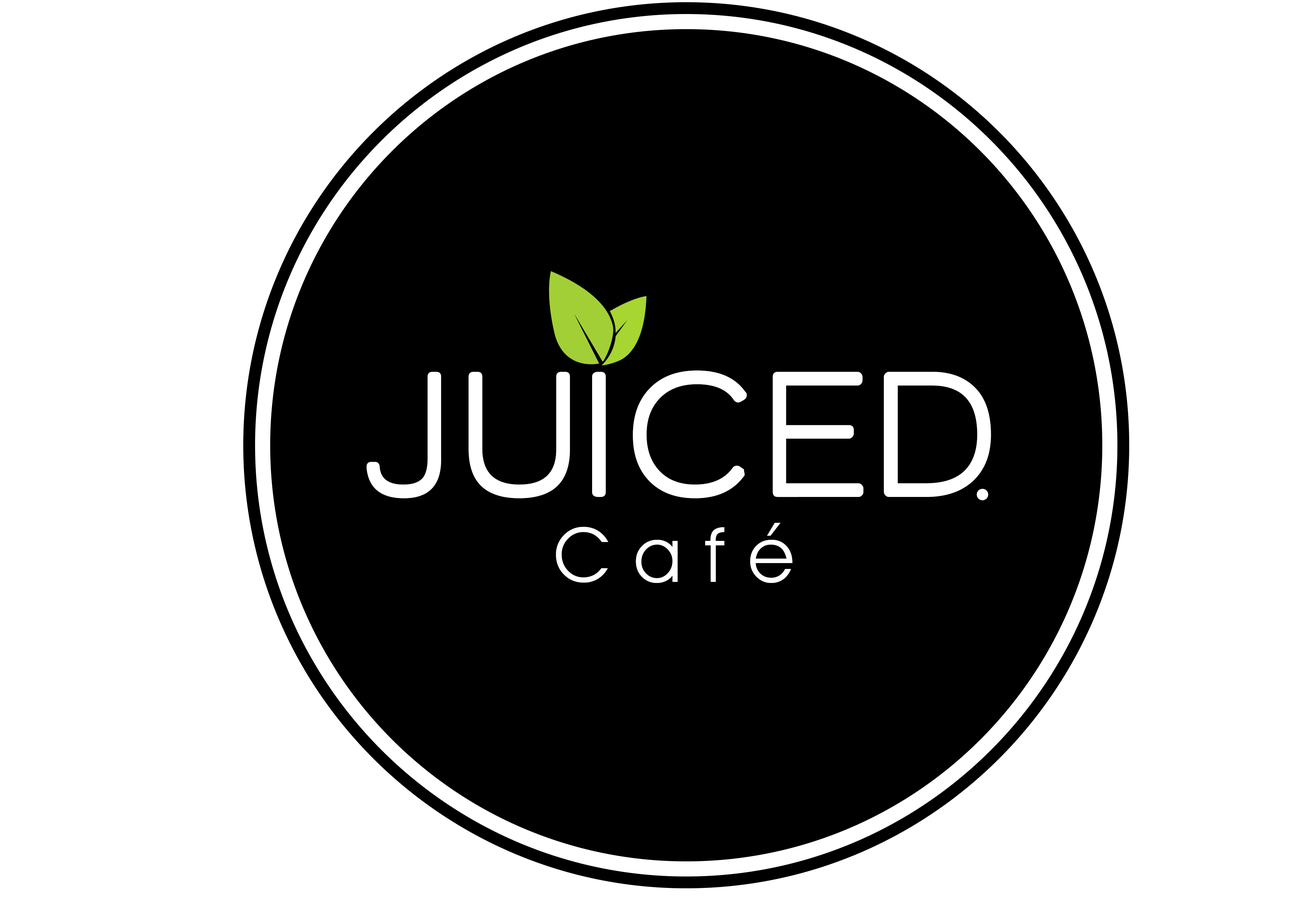
<style>
.page{position:relative;width:1292px;height:923px;background:#ffffff}
.page>*{position:absolute;margin:0}
.t1{font:184.5px "WalkwayRounded";letter-spacing:0.1em;color:#ffffff}
.t2{font:76px "AvantGardeITCbyBT-Book";letter-spacing:0.3em;color:#ffffff}
</style>
<div class="page">
<p class="t1" style="left:367px;top:370px;width:624px;height:128px">JUICED</p>
<p class="t2" style="left:556px;top:523px;width:237px;height:60px">Café</p>
</div>
